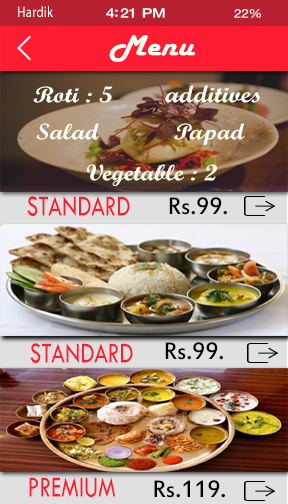
<style>
.page{position:relative;width:288px;height:504px}
.page>*{position:absolute;margin:0}
.t1{font:14.9px "MyriadPro-Regular";letter-spacing:0.02em;color:#ffffff;scale:0.86 1}
.t2{font:13.2px "HelveticaNeue-Medium";letter-spacing:-0.02em;color:#ffffff;scale:1.18 1}
.t3{font:12px "HelveticaNeue";letter-spacing:-0.02em;color:#ffffff;scale:1.12 1}
.t4{font:30px "HarlowSolid";color:#fffff5;scale:1.15 1}
.t5{font:22.7px "ScriptMTBold";color:#fffff5;scale:1.15 1}
.t6{font:24px "ScriptMTBold";color:#fefdfd;scale:1.15 1}
.t7{font:30px "TwCenMT-Regular";color:#ff1c32;text-transform:uppercase;scale:0.77 1}
.t8{font:26px "EstrangeloEdessa";color:#040404}
.t9{font:26px "EstrangeloEdessa";color:#020202}
</style>
<div class="page">
<p class="t1" style="left:18px;top:6px;width:35px;height:11px">Hardik</p>
<p class="t2" style="left:106px;top:8px;width:59px;height:10px">4:21 PM</p>
<p class="t3" style="left:234px;top:9px;width:27px;height:9px">22%</p>
<p class="t4" style="left:109px;top:35px;width:86px;height:27px">Menu</p>
<p class="t5" style="left:33px;top:86px;width:80px;height:17px">Roti : 5</p>
<p class="t6" style="left:165px;top:85px;width:95px;height:18px">additives</p>
<p class="t5" style="left:36px;top:123px;width:63px;height:17px">Salad</p>
<p class="t5" style="left:174px;top:123px;width:71px;height:22px">Papad</p>
<p class="t5" style="left:86px;top:164px;width:131px;height:22px">Vegetable : 2</p>
<p class="t7" style="left:27px;top:196px;width:103px;height:20px">Standard</p>
<p class="t8" style="left:169px;top:197px;width:58px;height:18px">Rs.99.</p>
<p class="t8" style="left:165px;top:342px;width:58px;height:18px">Rs.99.</p>
<p class="t7" style="left:30px;top:343px;width:103px;height:20px">Standard</p>
<p class="t7" style="left:29px;top:477px;width:87px;height:21px">premium</p>
<p class="t9" style="left:154px;top:480px;width:71px;height:18px">Rs.119.</p>
</div>
